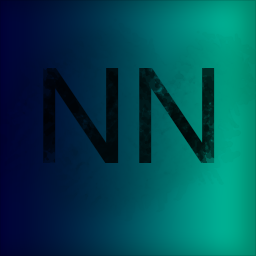
<style>
.page{position:relative;width:256px;height:256px}
.page>*{position:absolute;margin:0}
.t1{font:133.3px "ArialMT";color:#000000}
</style>
<div class="page">
<p class="t1" style="left:43px;top:68px;width:172px;height:95px">NN</p>
</div>
